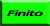
<style>
.page{position:relative;width:50px;height:26px;background:#10fd04}
.page>*{position:absolute;margin:0}
.t1{font:8.8px "Calibri-BoldItalic";letter-spacing:-0.055em;color:#000000;scale:2 1}
</style>
<div class="page">
<p class="t1" style="left:7px;top:10px;width:36px;height:6px">Finito</p>
</div>
